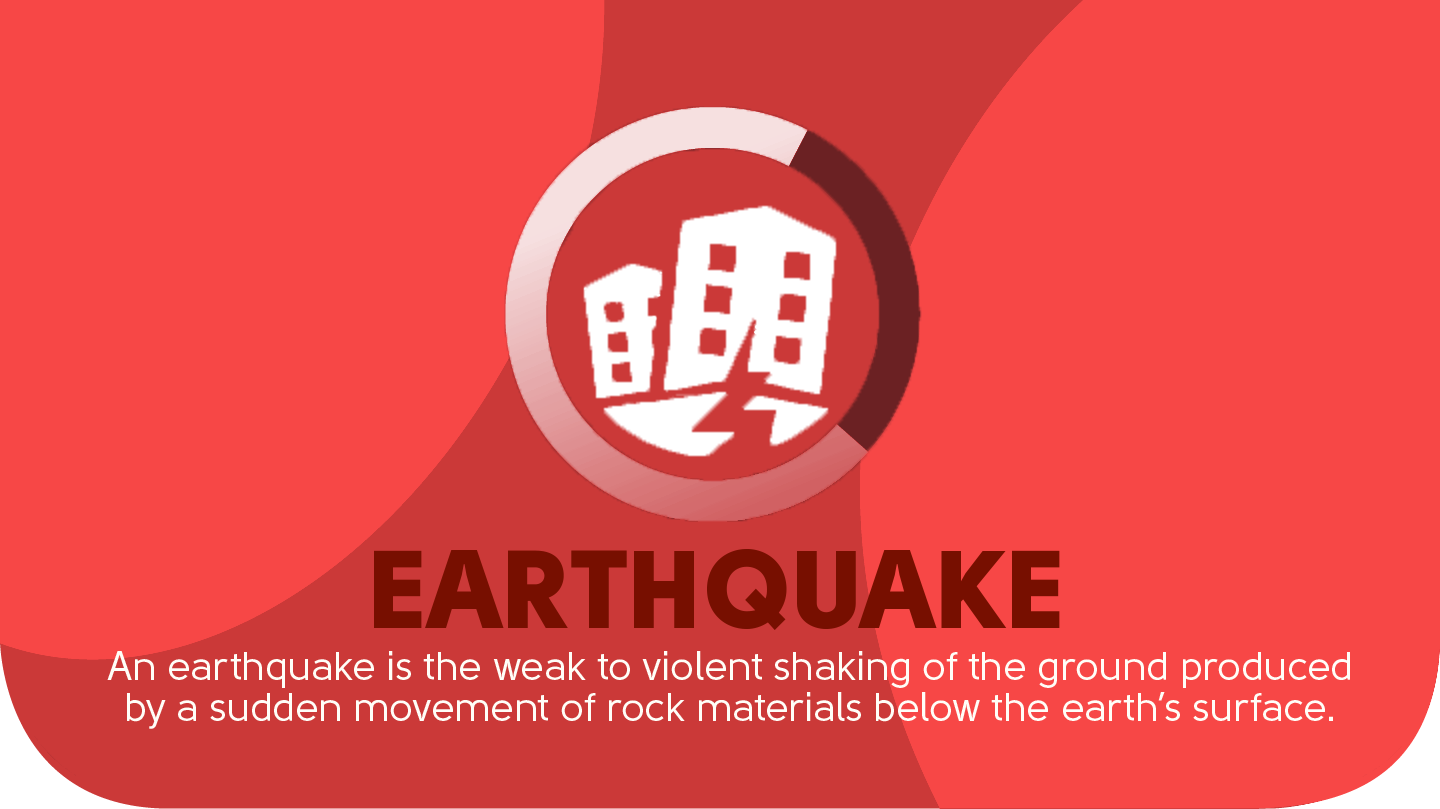
<style>
.page{position:relative;width:1440px;height:809px;background:#f74746}
.page>*{position:absolute;margin:0}
.t1{font:110px "Solomon-Sans-Black";color:#770f00}
.t2{font:40px/41px "Solomon-Sans-Normal";color:#fffef8}
</style>
<div class="page">
<p class="t1" style="left:374px;top:548px;width:686px;height:82px">EARTHQUAKE</p>
<p class="t2" style="left:107px;top:651px;width:1243px;height:78px;text-align:center">An earthquake is the weak to violent shaking of the ground produced<br>by a sudden movement of rock materials below the earth’s surface.</p>
</div>
